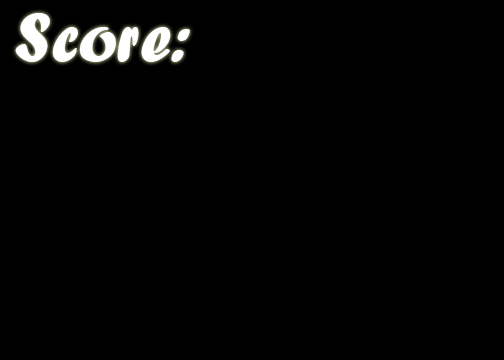
<style>
.page{position:relative;width:504px;height:360px;background:#000000}
.page>*{position:absolute;margin:0}
.t1{font:72px "ForteMT";color:#ffffff}
</style>
<div class="page">
<p class="t1" style="left:15px;top:13px;width:175px;height:49px">Score:</p>
</div>
